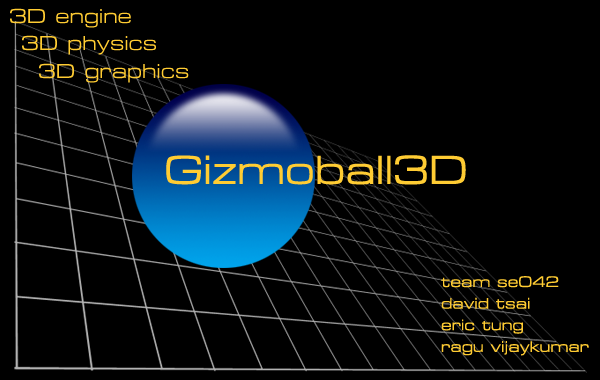
<style>
.page{position:relative;width:600px;height:380px;background:#000000}
.page>*{position:absolute;margin:0}
.t1{font:24px "MetrostyleExtended-Regular";color:#ffcc33}
.t2{font:48px "MetrostyleExtended-Regular";color:#ffcc33}
.t3{font:18px "MetrostyleExtended-Regular";color:#ffcc33}
</style>
<div class="page">
<p class="t1" style="left:10px;top:8px;width:121px;height:20px">3D engine</p>
<p class="t1" style="left:22px;top:35px;width:134px;height:20px">3D physics</p>
<p class="t1" style="left:39px;top:63px;width:150px;height:20px">3D graphics</p>
<p class="t2" style="left:166px;top:155px;width:300px;height:30px">Gizmoball3D</p>
<p class="t3" style="left:441px;top:276px;width:148px;height:80px">team se042<br>david tsai<br>eric tung<br>ragu vijaykumar</p>
</div>
